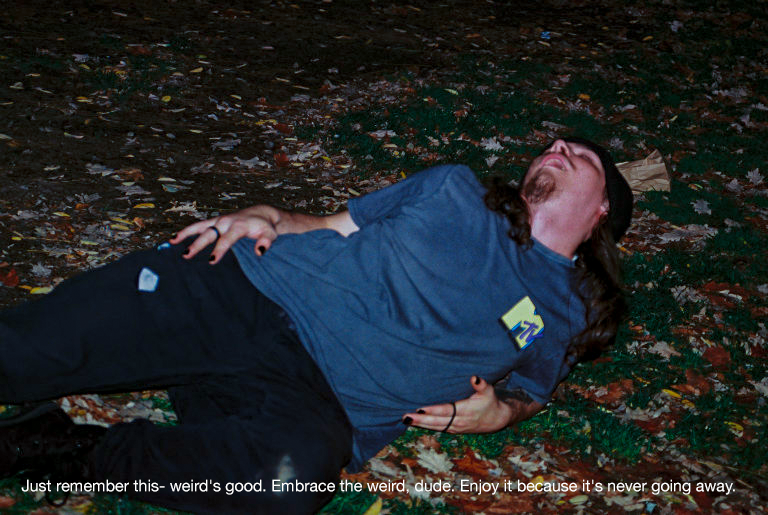
<style>
.page{position:relative;width:768px;height:515px}
.page>*{position:absolute;margin:0}
.t1{font:16px "HelveticaNeue";color:#ffffff}
</style>
<div class="page">
<p class="t1" style="left:21px;top:479px;width:714px;height:16px">Just remember this- weird's good. Embrace the weird, dude. Enjoy it because it's never going away.</p>
</div>
